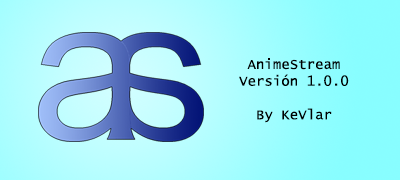
<style>
.page{position:relative;width:400px;height:180px}
.page>*{position:absolute;margin:0}
.t1{font:14px "LucidaConsole";color:#000000}
</style>
<div class="page">
<p class="t1" style="left:239px;top:58px;width:110px;height:65px;text-align:center">AnimeStream<br>Versión 1.0.0<br><br>By KeVlar</p>
</div>
